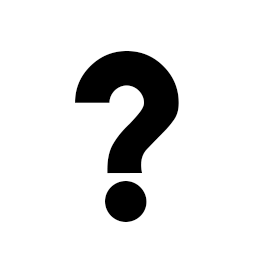
<style>
.page{position:relative;width:256px;height:256px;background:#ffffff}
.page>*{position:absolute;margin:0}
.t1{font:205.7px "LemonMilk";letter-spacing:0.01em;color:#000000}
</style>
<div class="page">
<p class="t1" style="left:75px;top:51px;width:104px;height:171px">?</p>
</div>
